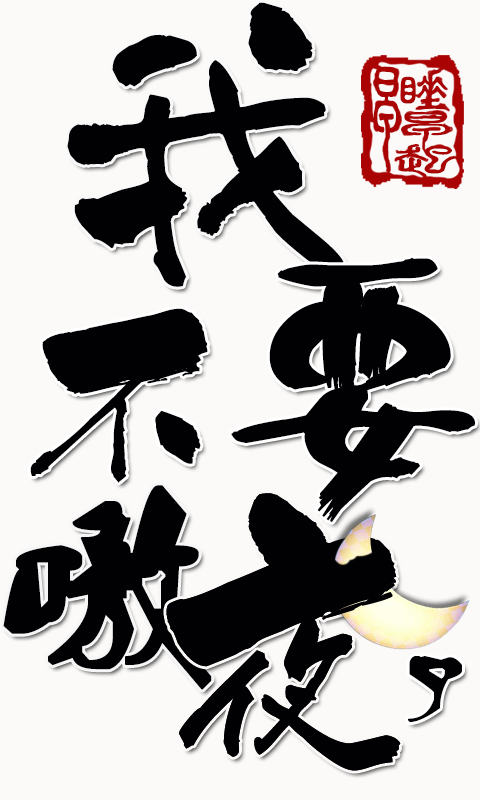
<style>
.page{position:relative;width:480px;height:800px;background:#fbfaf9}
.page>*{position:absolute;margin:0}
.t1{font:300px "KyoMadoka";color:#010003;font-weight:bold}
.t2{font:111px "IDJinZhuan";color:#a90303;font-weight:bold;scale:0.47 1}
.t3{font:52.7px "IDJinZhuan";color:#a90303;font-weight:bold;scale:1.29 1}
.t4{font:38.1px "IDJinZhuan";color:#a90303;font-weight:bold;scale:2.74 1}
.t5{font:37.4px "IDJinZhuan";color:#a90303;font-weight:bold;scale:2.42 1}
.t6{font:280px "Hakuu";color:#010003;font-weight:bold}
.t7{font:200px "GeikaiSuikou";color:#010003;font-weight:bold}
.t8{font:210px "Ò¶¸ùÓÑÌØÉ«¼òÌåÉý¼¶°æ";color:#010003;font-weight:bold}
.t9{font:280px "GeikaiSuikou";color:#010003;font-weight:bold}
.t10{font:75px "Ò¶¸ùÓÑÌØÉ«¼òÌåÉý¼¶°æ";color:#010003;font-weight:bold}
</style>
<div class="page">
<p class="t1" style="left:67px;top:2px;width:277px;height:285px">我</p>
<p class="t2" style="left:373px;top:66px;width:27px;height:102px">早</p>
<p class="t3" style="left:400px;top:69px;width:47px;height:41px">睡</p>
<p class="t4" style="left:401px;top:112px;width:50px;height:36px">早</p>
<p class="t5" style="left:395px;top:144px;width:61px;height:32px">起</p>
<p class="t6" style="left:231px;top:257px;width:244px;height:265px">要</p>
<p class="t7" style="left:30px;top:308px;width:178px;height:175px">不</p>
<p class="t8" style="left:3px;top:485px;width:209px;height:205px">嗷</p>
<p class="t9" style="left:166px;top:493px;width:235px;height:278px">夜</p>
<p class="t10" style="left:408px;top:656px;width:54px;height:66px">了</p>
</div>
